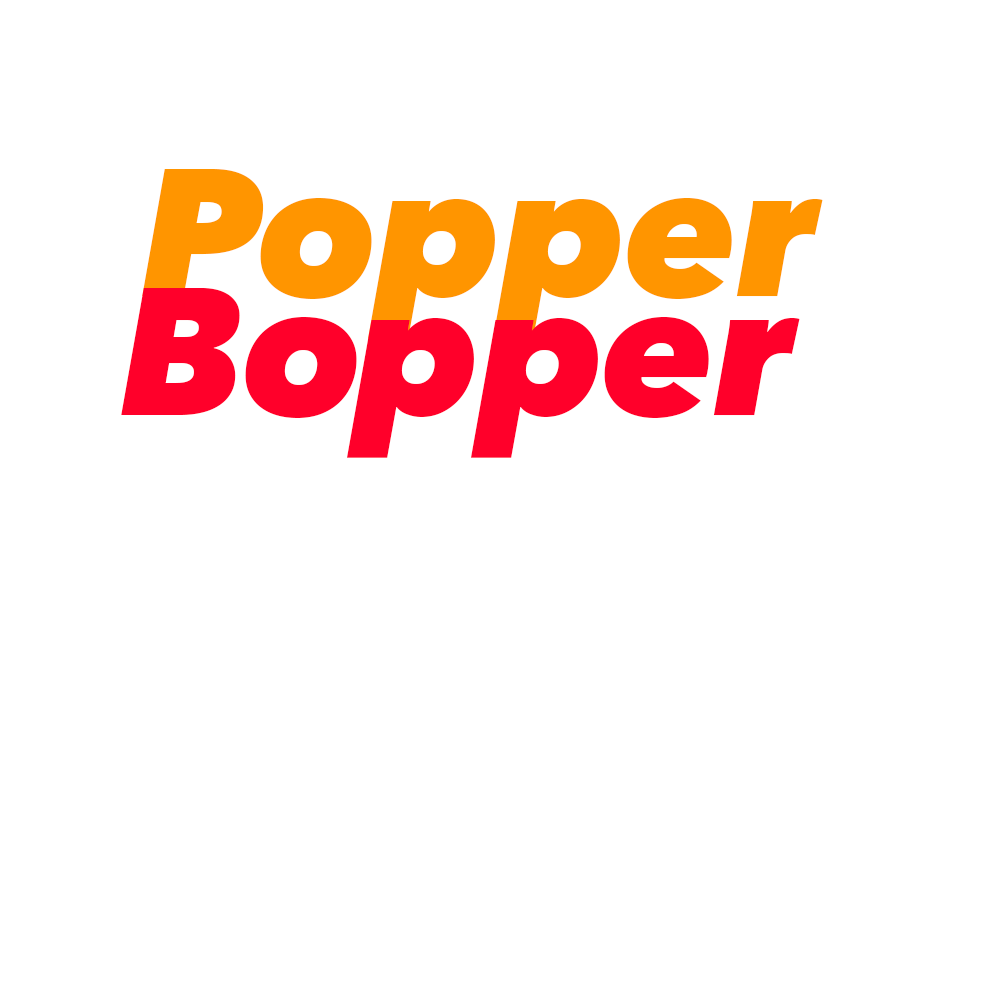
<style>
.page{position:relative;width:1000px;height:1000px;background:#ffffff}
.page>*{position:absolute;margin:0}
.t1{font:180px "AvenirNext-HeavyItalic";color:#ff9500}
.t2{font:180px "AvenirNext-HeavyItalic";letter-spacing:-0.005em;color:#ff002a}
.t3{font:180px "AvenirNext-HeavyItalic";color:#ff002a}
.t4{font:180px "AvenirNext-HeavyItalic";letter-spacing:-0.035em;color:#ff002a}
</style>
<div class="page">
<p class="t1" style="left:142px;top:169px;width:681px;height:170px">Popper</p>
<p class="t2" style="left:121px;top:288px;width:679px;height:170px"><span class="t3">B</span><span class="t4">o</span>pp<span class="t3">er</span></p>
</div>
